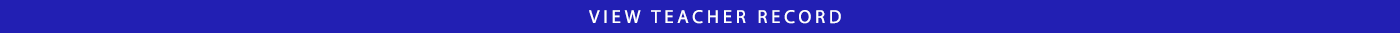
<style>
.page{position:relative;width:1400px;height:33px;background:#221fb3}
.page>*{position:absolute;margin:0}
.t1{font:18.8px "MyriadPro-Regular";letter-spacing:0.2em;color:#ffffff}
</style>
<div class="page">
<p class="t1" style="left:589px;top:10px;width:252px;height:14px">VIEW TEACHER RECORD</p>
</div>
